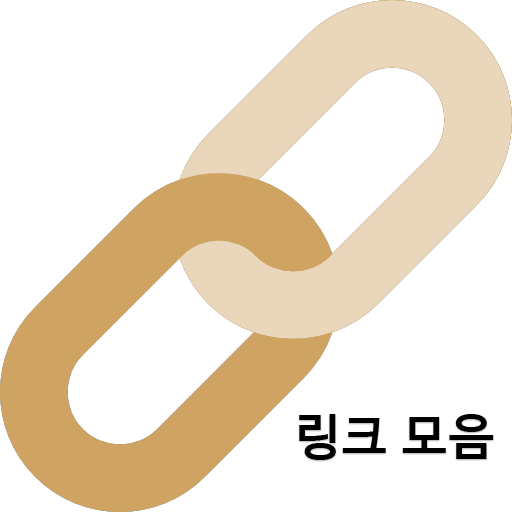
<style>
.page{position:relative;width:512px;height:512px;background:#ffffff}
.page>*{position:absolute;margin:0}
.t1{font:50px "HancomGothicBold";color:#000000}
</style>
<div class="page">
<p class="t1" style="left:299px;top:414px;width:195px;height:46px">링크 모음</p>
</div>
